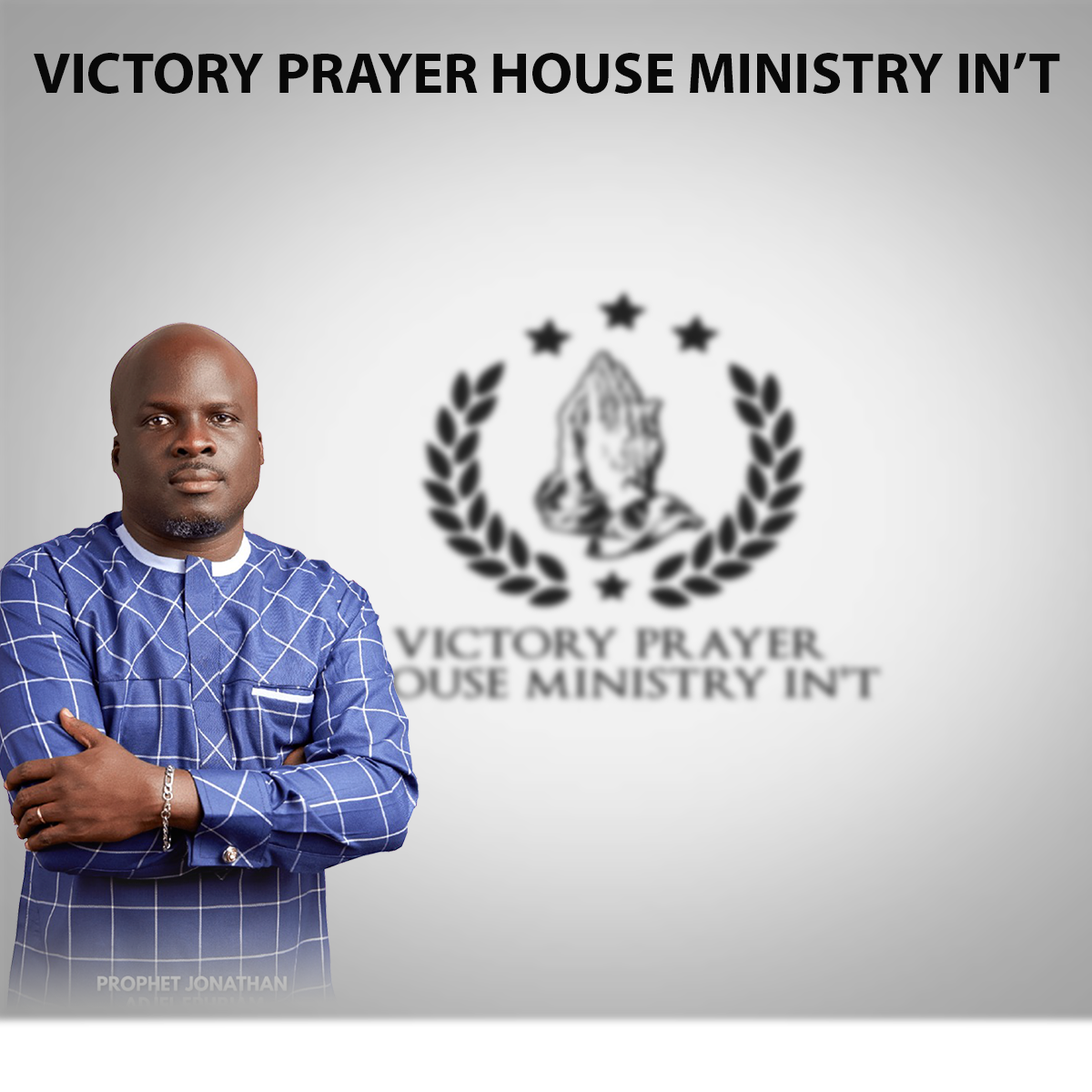
<style>
.page{position:relative;width:1092px;height:1092px}
.page>*{position:absolute;margin:0}
.t1{font:58.6px "MyriadPro-Bold";color:#080808}
</style>
<div class="page">
<p class="t1" style="left:34px;top:53px;width:1026px;height:41px">VICTORY PRAYER HOUSE MINISTRY IN’T</p>
</div>
